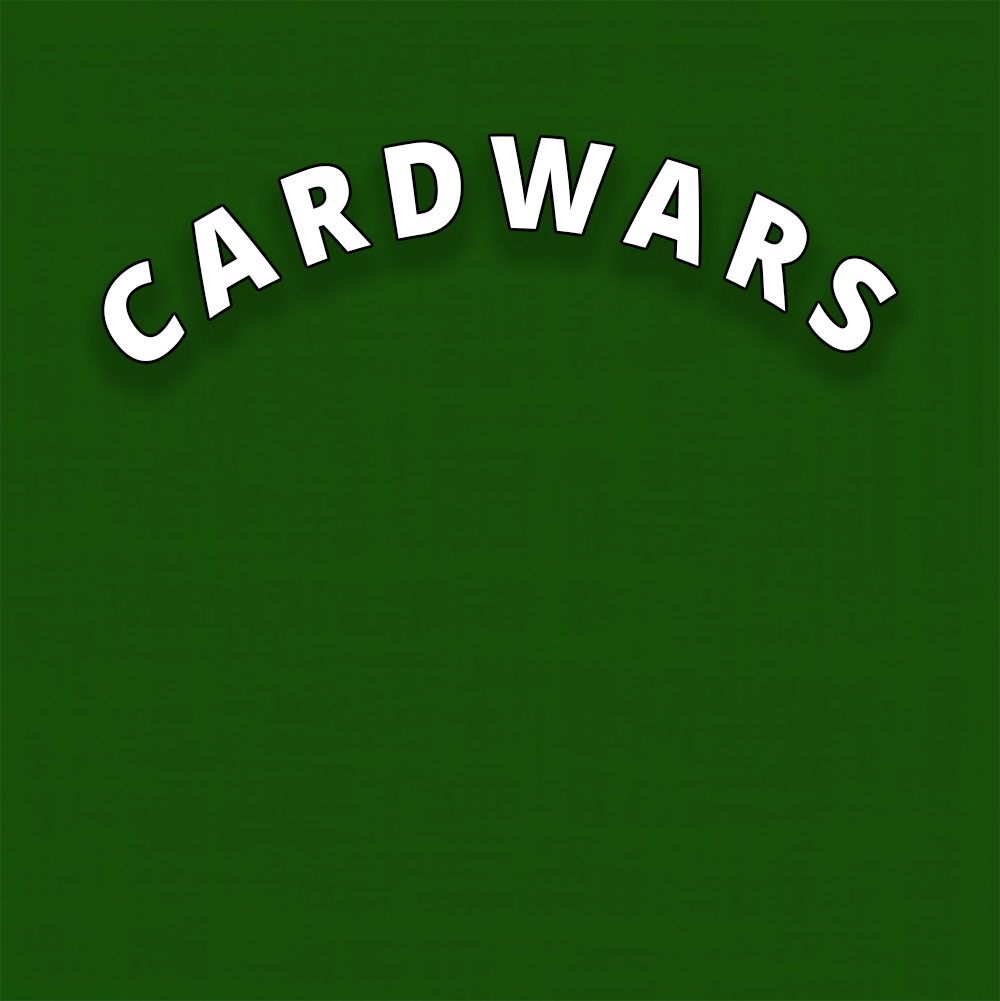
<style>
.page{position:relative;width:1000px;height:1001px;background:#174e09}
.page>*{position:absolute;margin:0}
.t1{font:138.6px "OpenSans-Extrabold";letter-spacing:0.2em;color:#ffffff;text-transform:uppercase;scale:0.65 1}
</style>
<div class="page">
<p class="t1" style="left:104px;top:136px;width:793px;height:225px">CardWars</p>
</div>
